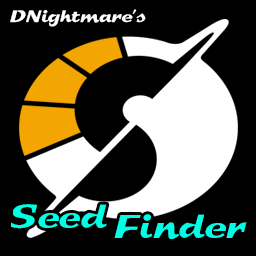
<style>
.page{position:relative;width:256px;height:256px;background:#000000}
.page>*{position:absolute;margin:0}
.t1{font:18px "Splash";color:#ffffff}
.t2{font:36px "Splash";color:#00ffe4}
</style>
<div class="page">
<p class="t1" style="left:10px;top:9px;width:136px;height:18px">DNightmare's</p>
<p class="t2" style="left:11px;top:204px;width:96px;height:25px">Seed</p>
<p class="t2" style="left:114px;top:214px;width:133px;height:25px">Finder</p>
</div>
